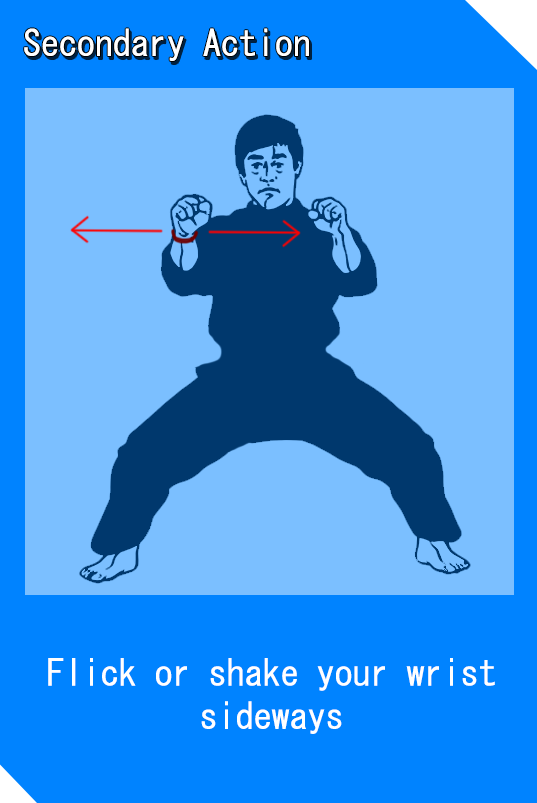
<style>
.page{position:relative;width:537px;height:803px;background:#7bbfff}
.page>*{position:absolute;margin:0}
.t1{font:36px "MS-Gothic";color:#ffffff}
</style>
<div class="page">
<p class="t1" style="left:24px;top:28px;width:285px;height:33px">Secondary Action</p>
<p class="t1" style="left:48px;top:658px;width:447px;height:76px;text-align:center">Flick or shake your wrist<br>sideways</p>
</div>
